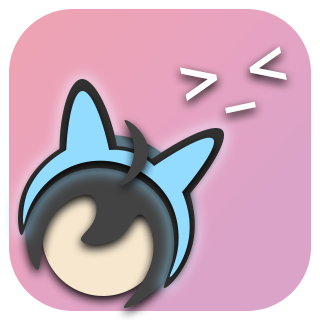
<style>
.page{position:relative;width:320px;height:320px}
.page>*{position:absolute;margin:0}
.t1{font:72px "HarmonyOS_Sans_SC";letter-spacing:-0.02em;color:#ffffff}
</style>
<div class="page">
<p class="t1" style="left:180px;top:46px;width:107px;height:68px;rotate:-12deg">&gt;_&lt;</p>
</div>
